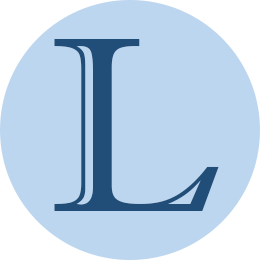
<style>
.page{position:relative;width:260px;height:260px;background:#bdd6ef}
.page>*{position:absolute;margin:0}
.t1{font:250px "ImprintMT-Shadow";color:#204e79}
</style>
<div class="page">
<p class="t1" style="left:54px;top:39px;width:165px;height:172px">L</p>
</div>
